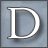
<style>
.page{position:relative;width:48px;height:48px}
.page>*{position:absolute;margin:0}
.t1{font:48px "Dark11";color:#ffffff}
</style>
<div class="page">
<p class="t1" style="left:7px;top:7px;width:33px;height:32px">D</p>
</div>
